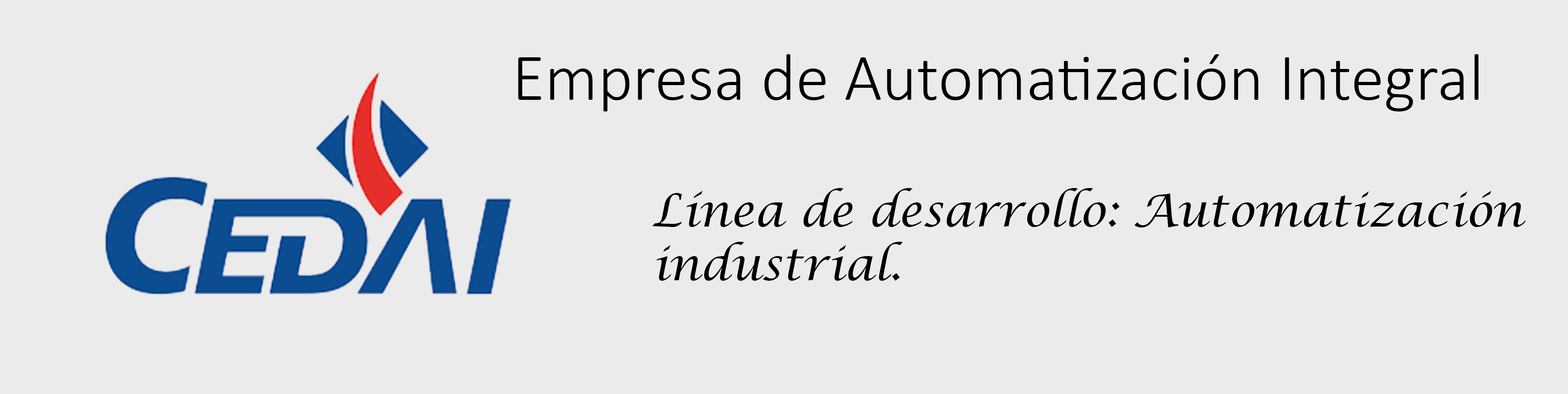
<style>
.page{position:relative;width:1568px;height:394px;background:#ebebeb}
.page>*{position:absolute;margin:0}
.t1{font:67.1px "Calibri-Light";color:#000000}
.t2{font:44.8px "LucidaCalligraphy-Italic";color:#000000}
</style>
<div class="page">
<p class="t1" style="left:518px;top:54px;width:960px;height:57px">Empresa de Automatización Integral</p>
<p class="t2" style="left:652px;top:188px;width:874px;height:93px">Línea de desarrollo: Automatización industrial.</p>
</div>
